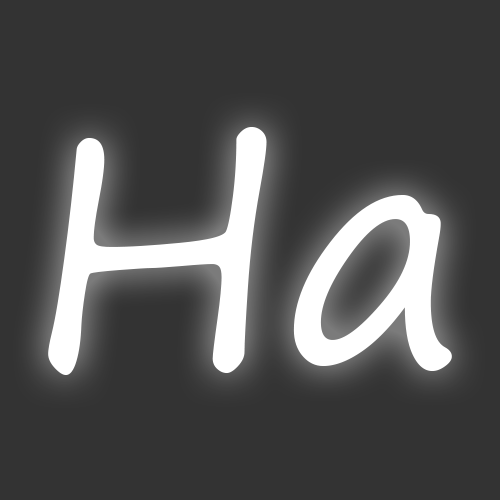
<style>
.page{position:relative;width:500px;height:500px;background:#333333}
.page>*{position:absolute;margin:0}
.t1{font:316.7px "SegoePrint";color:#ffffff}
</style>
<div class="page">
<p class="t1" style="left:48px;top:127px;width:404px;height:248px">Ha</p>
</div>
